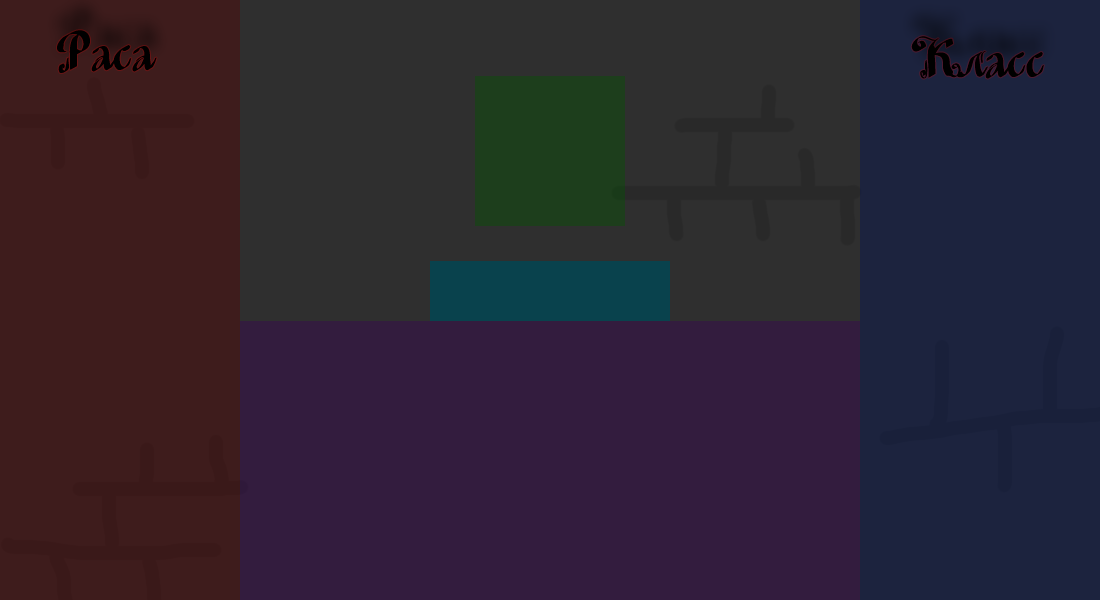
<style>
.page{position:relative;width:1100px;height:600px;background:#331c3e}
.page>*{position:absolute;margin:0}
.t1{font:50px "MinusmanC";color:#000000}
</style>
<div class="page">
<p class="t1" style="left:57px;top:30px;width:100px;height:43px">Раса</p>
<p class="t1" style="left:911px;top:36px;width:133px;height:43px">Класс</p>
</div>
